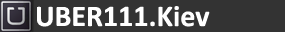
<style>
.page{position:relative;width:285px;height:32px;background:#333333}
.page>*{position:absolute;margin:0}
.t1{font:30px "Calibri-Bold";color:#ffffff}
</style>
<div class="page">
<p class="t1" style="left:37px;top:6px;width:173px;height:21px">UBER111.Kiev</p>
</div>
